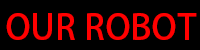
<style>
.page{position:relative;width:200px;height:50px;background:#000000}
.page>*{position:absolute;margin:0}
.t1{font:35.2px "AdobeHeitiStd-Regular";color:#ff0000}
</style>
<div class="page">
<p class="t1" style="left:6px;top:13px;width:191px;height:27px">OUR ROBOT</p>
</div>
